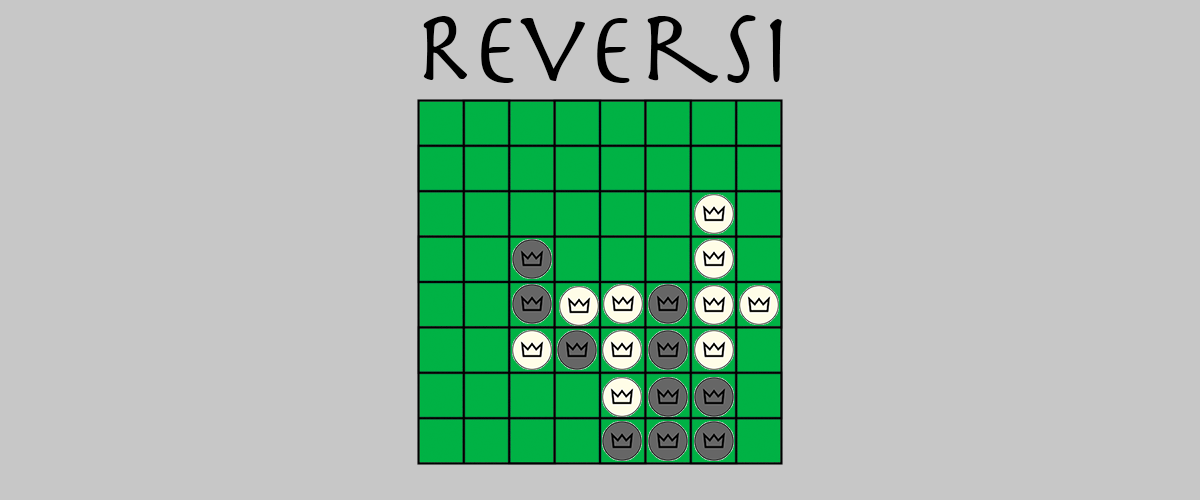
<style>
.page{position:relative;width:1200px;height:500px;background:#c7c7c7}
.page>*{position:absolute;margin:0}
.t1{font:104.2px "Herculanum";color:#000000}
</style>
<div class="page">
<p class="t1" style="left:423px;top:15px;width:359px;height:68px">Reversi</p>
</div>
